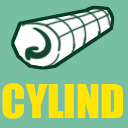
<style>
.page{position:relative;width:128px;height:128px;background:#78bea2}
.page>*{position:absolute;margin:0}
.t1{font:43.1px "Impact";color:#ffe500}
</style>
<div class="page">
<p class="t1" style="left:2px;top:83px;width:121px;height:36px">CYLIND</p>
</div>
